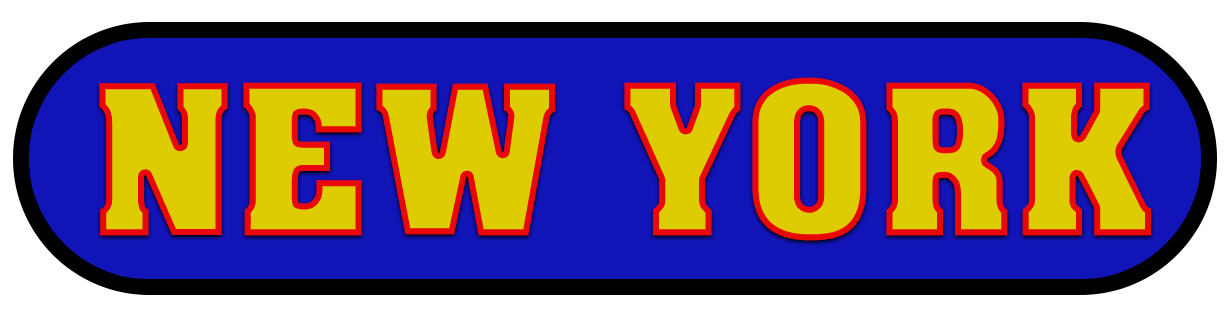
<style>
.page{position:relative;width:1230px;height:318px;background:#1114b7}
.page>*{position:absolute;margin:0}
.t1{font:200px "AcmeFont";color:#decc03}
</style>
<div class="page">
<p class="t1" style="left:99px;top:77px;width:1052px;height:164px">NEW YORK</p>
</div>
